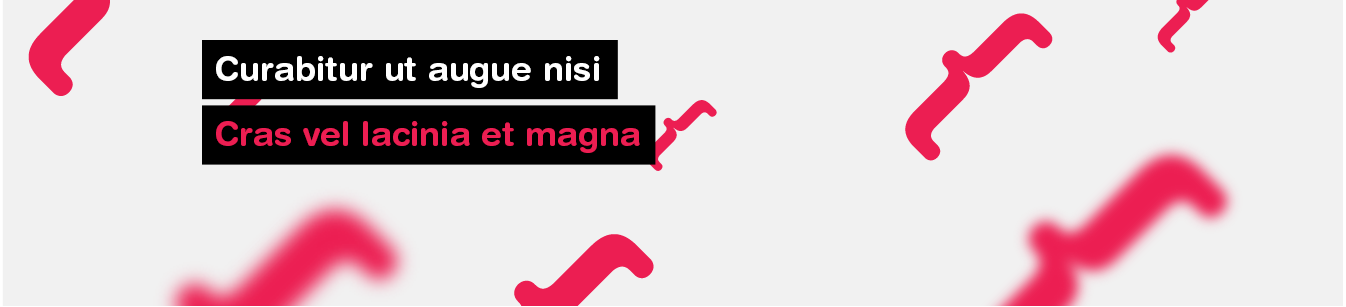
<style>
.page{position:relative;width:1346px;height:307px;background:#f1f1f1}
.page>*{position:absolute;margin:0}
.t1{font:34.3px "HelveticaRoundedLTStd-Bd";color:#ffffff}
.t2{font:34.3px "HelveticaRoundedLTStd-Bd";color:#ec1e52}
</style>
<div class="page">
<p class="t1" style="left:216px;top:56px;width:384px;height:32px">Curabitur ut augue nisi</p>
<p class="t2" style="left:216px;top:121px;width:424px;height:32px">Cras vel lacinia et magna</p>
</div>
